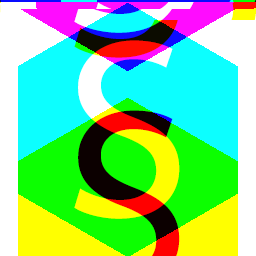
<style>
.page{position:relative;width:256px;height:256px;background:#0cffff}
.page>*{position:absolute;margin:0}
.t1{font:256px "MyriadPro-Regular"}
</style>
<div class="page">
<p class="t1" style="left:74px;top:38px;width:106px;height:179px">S</p>
</div>
